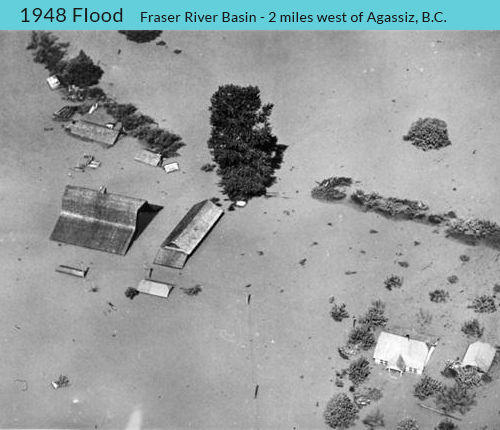
<style>
.page{position:relative;width:500px;height:430px}
.page>*{position:absolute;margin:0}
.t1{font:20px "Lato-Regular";letter-spacing:0.025em;color:#1a1a1a}
.t2{font:14px "Lato-Regular";letter-spacing:0.025em;color:#1a1a1a}
</style>
<div class="page">
<p class="t1" style="left:21px;top:8px;width:102px;height:14px">1948 Flood</p>
<p class="t2" style="left:141px;top:12px;width:306px;height:12px">Fraser River Basin - 2 miles west of Agassiz, B.C.</p>
</div>
